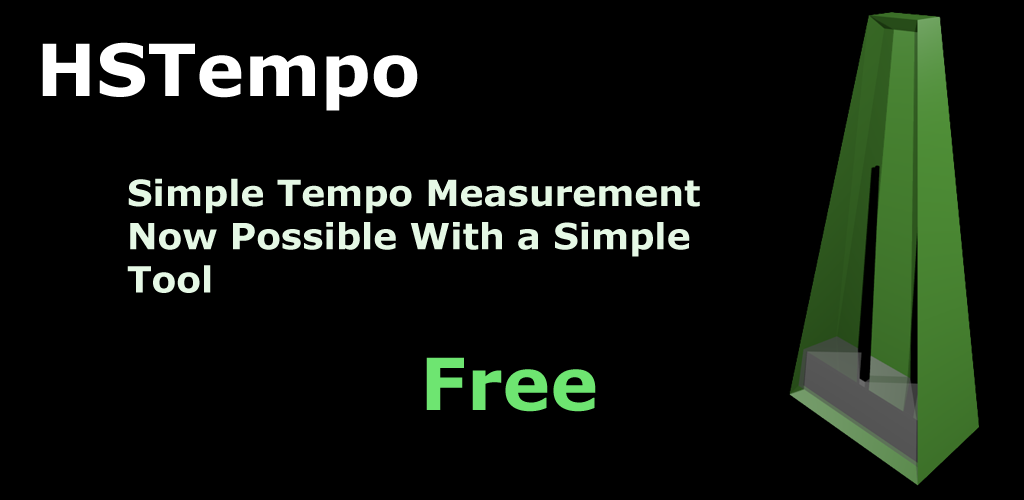
<style>
.page{position:relative;width:1024px;height:500px;background:#000000}
.page>*{position:absolute;margin:0}
.t1{font:72px "Verdana-Bold";color:#ffffff}
.t2{font:36px "Verdana-Bold";color:#e5f8e5}
.t3{font:72px "Verdana-Bold";color:#6ee571}
</style>
<div class="page">
<p class="t1" style="left:42px;top:42px;width:376px;height:69px">HSTempo</p>
<p class="t2" style="left:127px;top:178px;width:573px;height:115px">Simple Tempo Measurement<br>Now Possible With a Simple<br>Tool</p>
<p class="t3" style="left:426px;top:357px;width:170px;height:55px">Free</p>
</div>
